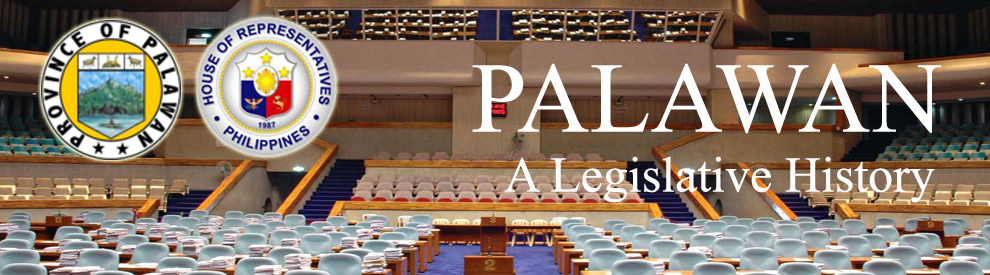
<style>
.page{position:relative;width:990px;height:275px}
.page>*{position:absolute;margin:0}
.t1{font:50px "TimesNewRomanPSMT";color:#fdfcfc}
.t2{font:100px "TimesNewRomanPSMT";color:#fdfdfd}
</style>
<div class="page">
<p class="t1" style="left:472px;top:63px;width:470px;height:140px;text-align:center"><span class="t2">PALAWAN<br></span>A Legislative History</p>
</div>
